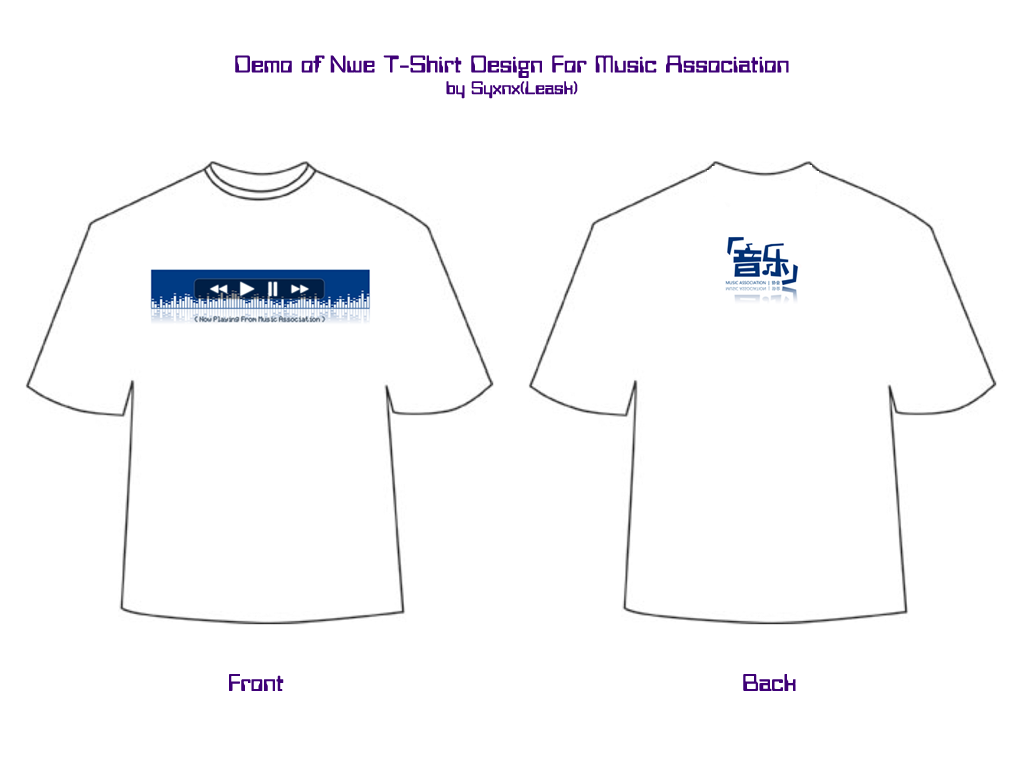
<style>
.page{position:relative;width:1024px;height:768px;background:#ffffff}
.page>*{position:absolute;margin:0}
.t1{font:24px "933-CAI978";color:#3e0077}
.t2{font:18px "933-CAI978";color:#3e0077}
</style>
<div class="page">
<p class="t1" style="left:235px;top:55px;width:554px;height:44px;text-align:center">Demo of Nwe T-Shirt Design For Music Association<br><span class="t2">by Syxnx(Leask)</span></p>
<p class="t1" style="left:229px;top:674px;width:567px;height:17px">Front                                                       Back</p>
</div>
